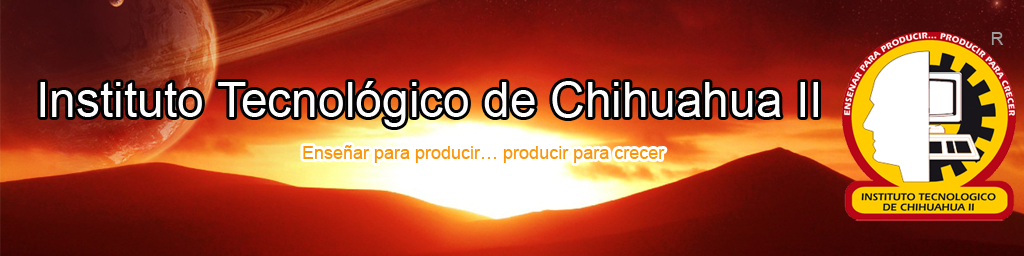
<style>
.page{position:relative;width:1024px;height:256px}
.page>*{position:absolute;margin:0}
.t1{font:18px "ArialMT";color:#9c9c9c}
.t2{font:48px "ArialMT";color:#fbfbfb}
.t3{font:18px "ArialMT";color:#f9960a}
</style>
<div class="page">
<p class="t1" style="left:991px;top:32px;width:13px;height:13px">R</p>
<p class="t2" style="left:40px;top:81px;width:778px;height:46px">Instituto Tecnológico de Chihuahua II</p>
<p class="t3" style="left:303px;top:145px;width:362px;height:18px">Enseñar para producir… producir para crecer</p>
</div>
